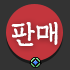
<style>
.page{position:relative;width:70px;height:70px;background:#333333}
.page>*{position:absolute;margin:0}
.t1{font:26.7px "ChosunCentennial";letter-spacing:-0.01em;color:#ffffff}
</style>
<div class="page">
<p class="t1" style="left:11px;top:22px;width:47px;height:24px">판매</p>
</div>
